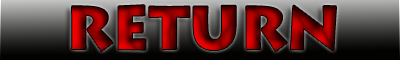
<style>
.page{position:relative;width:400px;height:60px}
.page>*{position:absolute;margin:0}
.t1{font:60px "LithosPro-Black"}
</style>
<div class="page">
<p class="t1" style="left:72px;top:5px;width:264px;height:46px">RETURN</p>
</div>
